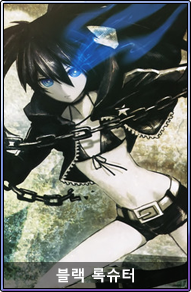
<style>
.page{position:relative;width:191px;height:292px}
.page>*{position:absolute;margin:0}
.t1{font:15px "MalgunGothicBold";color:#ffffff}
</style>
<div class="page">
<p class="t1" style="left:56px;top:268px;width:78px;height:15px">블랙 록슈터</p>
</div>
